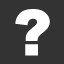
<style>
.page{position:relative;width:64px;height:64px;background:#333333}
.page>*{position:absolute;margin:0}
.t1{font:64px "Arial-Black";color:#ffffff}
</style>
<div class="page">
<p class="t1" style="left:15px;top:9px;width:35px;height:47px">?</p>
</div>
